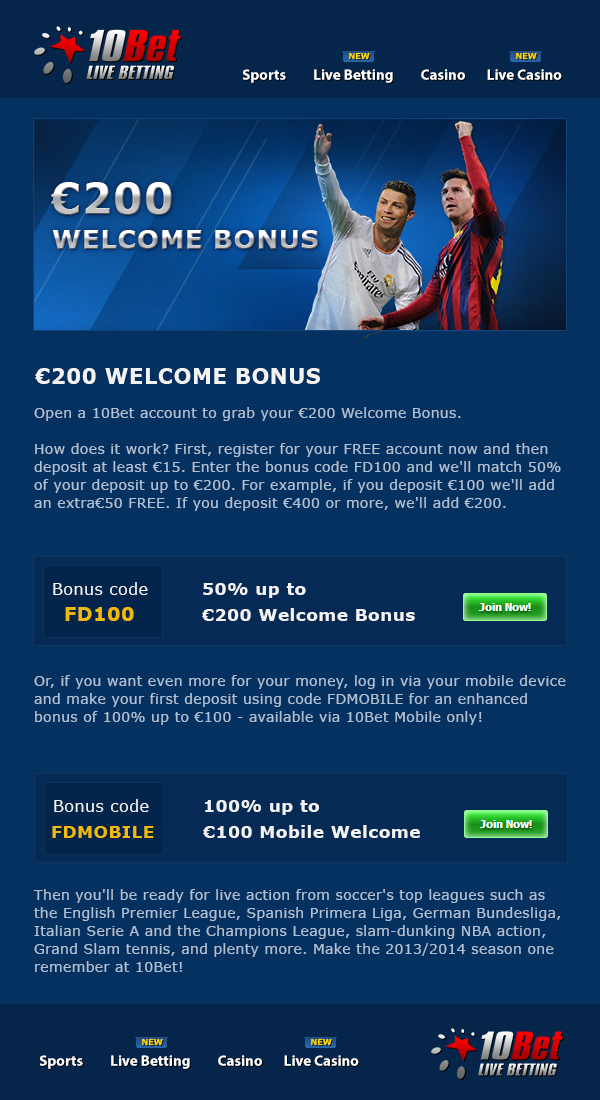
<style>
.page{position:relative;width:600px;height:1100px;background:#053160}
.page>*{position:absolute;margin:0}
.t1{font:8px "Verdana-Bold";color:#ffd800;text-transform:uppercase}
.t2{font:15px "MyriadPro-Bold";color:#ffffff}
.t3{font:21px "Verdana-Bold";letter-spacing:0.025em;color:#f3f3f3}
.t4{font:14px/18px "Verdana";letter-spacing:0.025em;color:#afc0d3}
.t5{font:16px "Verdana";letter-spacing:0.025em;color:#f3f3f3}
.t6{font:17px/26px "Verdana-Bold";letter-spacing:0.025em;color:#f3f3f3}
.t7{font:19px "Verdana-Bold";letter-spacing:0.025em;color:#f0b90c}
.t8{font:17px "Verdana-Bold";letter-spacing:0.025em;color:#f0b90c}
</style>
<div class="page">
<p class="t1" style="left:349px;top:52px;width:21px;height:8px">new</p>
<p class="t1" style="left:516px;top:52px;width:21px;height:8px">new</p>
<p class="t2" style="left:243px;top:69px;width:319px;height:14px">Sports         Live Betting         Casino       Live Casino</p>
<p class="t3" style="left:35px;top:368px;width:285px;height:16px">€200 WELCOME BONUS</p>
<p class="t4" style="left:34px;top:407px;width:527px;height:104px">Open a 10Bet account to grab your €200 Welcome Bonus.<br><br>How does it work? First, register for your FREE account now and then deposit at least €15. Enter the bonus code FD100 and we'll match 50% of your deposit up to €200. For example, if you deposit €100 we'll add an extra€50 FREE. If you deposit €400 or more, we'll add €200.</p>
<p class="t5" style="left:53px;top:582px;width:95px;height:13px">Bonus code</p>
<p class="t6" style="left:202px;top:583px;width:213px;height:38px">50% up to <br>€200 Welcome Bonus</p>
<p class="t7" style="left:65px;top:607px;width:69px;height:14px">FD100</p>
<p class="t4" style="left:34px;top:675px;width:532px;height:50px">Or, if you want even more for your money, log in via your mobile device and make your first deposit using code FDMOBILE for an enhanced bonus of 100% up to €100 - available via 10Bet Mobile only!</p>
<p class="t5" style="left:54px;top:799px;width:95px;height:13px">Bonus code</p>
<p class="t6" style="left:203px;top:800px;width:217px;height:38px">100% up to <br>€100 Mobile Welcome</p>
<p class="t8" style="left:52px;top:826px;width:102px;height:12px">FDMOBILE</p>
<p class="t4" style="left:33px;top:889px;width:528px;height:83px">Then you'll be ready for live action from soccer's top leagues such as the English Premier League, Spanish Primera Liga, German Bundesliga, Italian Serie A and the Champions League, slam-dunking NBA action, Grand Slam tennis, and plenty more. Make the 2013/2014 season one remember at 10Bet!</p>
<p class="t1" style="left:142px;top:1038px;width:21px;height:8px">new</p>
<p class="t1" style="left:311px;top:1038px;width:21px;height:8px">new</p>
<p class="t2" style="left:40px;top:1055px;width:319px;height:14px">Sports         Live Betting         Casino       Live Casino</p>
</div>
